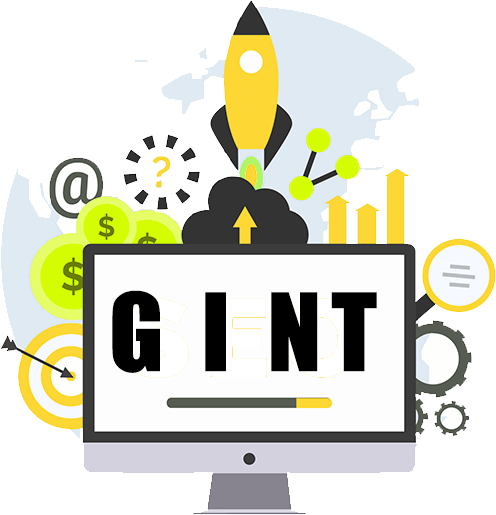
<style>
.page{position:relative;width:496px;height:515px;background:#ffffff}
.page>*{position:absolute;margin:0}
.t1{font:99.5px "Impact";letter-spacing:0.1em;color:#000000}
</style>
<div class="page">
<p class="t1" style="left:112px;top:290px;width:265px;height:83px">G I NT</p>
</div>
